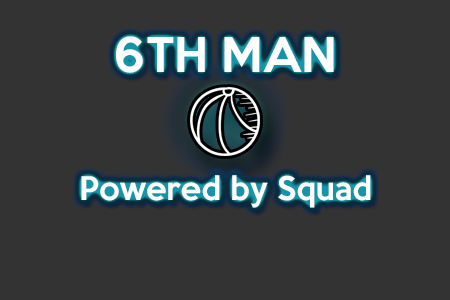
<style>
.page{position:relative;width:450px;height:300px;background:#333333}
.page>*{position:absolute;margin:0}
.t1{font:43.7px "KeepCalm-Medium";color:#ffffff}
.t2{font:29.8px "KeepCalm-Medium";color:#ffffff}
</style>
<div class="page">
<p class="t1" style="left:116px;top:36px;width:218px;height:37px">6TH MAN</p>
<p class="t2" style="left:81px;top:175px;width:290px;height:33px">Powered by Squad</p>
</div>
